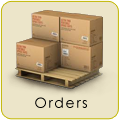
<style>
.page{position:relative;width:120px;height:120px;background:#ece5c9}
.page>*{position:absolute;margin:0}
.t1{font:14px "CenturyGothic";letter-spacing:0.121em;color:#000000}
</style>
<div class="page">
<p class="t1" style="left:35px;top:97px;width:52px;height:11px">Orders</p>
</div>
